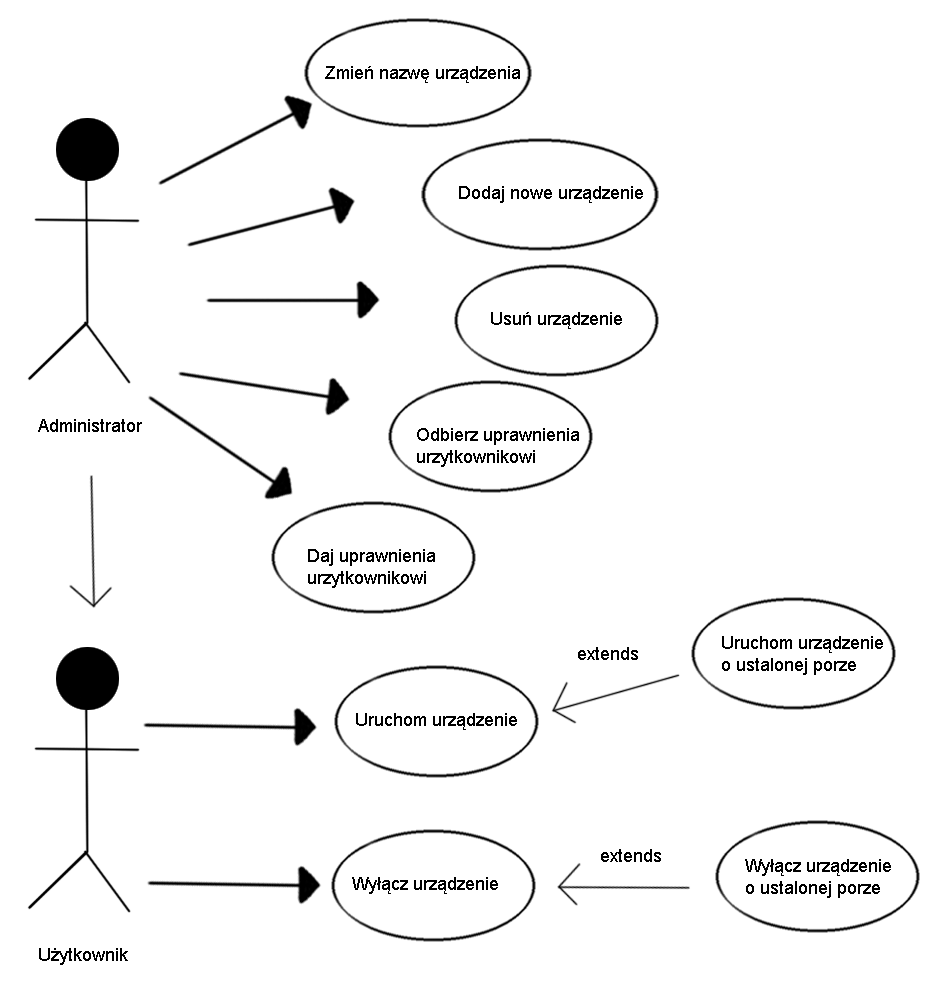
<style>
.page{position:relative;width:947px;height:984px;background:#ffffff}
.page>*{position:absolute;margin:0}
.t1{font:18px "ArialMT";color:#000000}
</style>
<div class="page">
<p class="t1" style="left:325px;top:66px;width:195px;height:17px">Zmień nazwę urządzenia</p>
<p class="t1" style="left:459px;top:186px;width:184px;height:17px">Dodaj nowe urządzenie</p>
<p class="t1" style="left:491px;top:312px;width:131px;height:17px">Usuń urządzenie</p>
<p class="t1" style="left:38px;top:419px;width:104px;height:13px">Administrator</p>
<p class="t1" style="left:38px;top:419px;width:104px;height:13px">Administrator</p>
<p class="t1" style="left:417px;top:428px;width:162px;height:39px;text-align:right">Odbierz uprawnienia<br>urzytkownikowi</p>
<p class="t1" style="left:308px;top:549px;width:127px;height:39px;text-align:right">Daj uprawnienia<br>urzytkownikowi</p>
<p class="t1" style="left:722px;top:636px;width:161px;height:39px;text-align:right">Uruchom urządzenie<br>o ustalonej porze</p>
<p class="t1" style="left:578px;top:647px;width:60px;height:13px">extends</p>
<p class="t1" style="left:356px;top:713px;width:161px;height:17px">Uruchom urządzenie</p>
<p class="t1" style="left:601px;top:849px;width:60px;height:13px">extends</p>
<p class="t1" style="left:745px;top:859px;width:146px;height:39px;text-align:right">Wyłącz urządzenie<br>o ustalonej porze</p>
<p class="t1" style="left:352px;top:877px;width:146px;height:17px">Wyłącz urządzenie</p>
<p class="t1" style="left:39px;top:948px;width:89px;height:17px">Użytkownik</p>
<p class="t1" style="left:39px;top:948px;width:89px;height:17px">Użytkownik</p>
</div>
